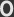
<style>
.page{position:relative;width:14px;height:17px;background:#333333}
.page>*{position:absolute;margin:0}
.t1{font:22.6px "GoogleSansDisplay-Bold";color:#e4e4e4}
</style>
<div class="page">
<p class="t1" style="left:0px;top:0px;width:14px;height:17px">0</p>
</div>
